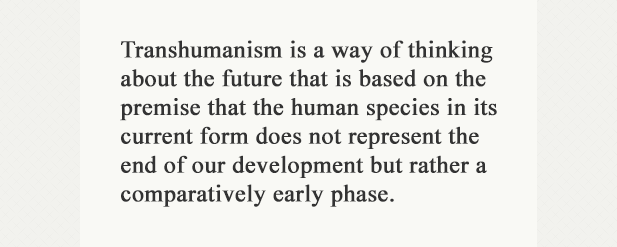
<style>
.page{position:relative;width:617px;height:247px;background:#f9f9f5}
.page>*{position:absolute;margin:0}
.t1{font:24px "TimesNewRomanPSMT";color:#333333;font-weight:bold}
</style>
<div class="page">
<p class="t1" style="left:120px;top:40px;width:377px;height:167px">Transhumanism is a way of thinking<br>about the future that is based on the<br>premise that the human species in its<br>current form does not represent the<br>end of our development but rather a<br>comparatively early phase.</p>
</div>
